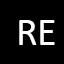
<style>
.page{position:relative;width:64px;height:64px;background:#000000}
.page>*{position:absolute;margin:0}
.t1{font:40px "Calibri";color:#feffff}
</style>
<div class="page">
<p class="t1" style="left:19px;top:20px;width:36px;height:25px">RE</p>
</div>
